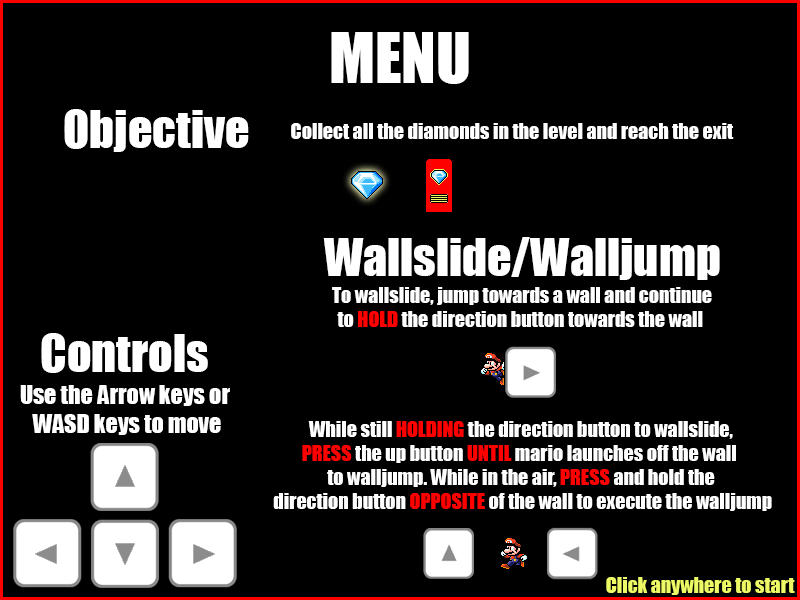
<style>
.page{position:relative;width:800px;height:600px;background:#000000}
.page>*{position:absolute;margin:0}
.t1{font:64px "Impact";color:#ffffff}
.t2{font:48px "Impact";color:#ffffff}
.t3{font:20px "Impact";color:#ffffff}
.t4{font:20px "Impact";color:#ff0000}
.t5{font:24px "Impact";color:#ffffff}
.t6{font:20px "Impact";color:#eefa65}
</style>
<div class="page">
<p class="t1" style="left:331px;top:32px;width:138px;height:52px">MENU</p>
<p class="t2" style="left:64px;top:109px;width:185px;height:43px">Objective</p>
<p class="t3" style="left:291px;top:123px;width:443px;height:16px">Collect all the diamonds in the level and reach the exit</p>
<p class="t2" style="left:323px;top:237px;width:397px;height:43px">Wallslide/Walljump</p>
<p class="t3" style="left:332px;top:287px;width:380px;height:40px;text-align:center">To wallslide, jump towards a wall and continue<br>to <span class="t4">HOLD </span>the direction button towards the wall</p>
<p class="t2" style="left:41px;top:333px;width:167px;height:40px">Controls</p>
<p class="t5" style="left:20px;top:385px;width:210px;height:50px;text-align:center">Use the Arrow keys or <br>WASD keys to move</p>
<p class="t3" style="left:273px;top:421px;width:499px;height:90px;text-align:center">While still <span class="t4">HOLDING</span> the direction button to wallslide,<br><span class="t4">PRESS</span> the up button <span class="t4">UNTIL</span> mario launches off the wall <br>to walljump. While in the air, <span class="t4">PRESS</span> and hold the<br> direction button <span class="t4">OPPOSITE</span> of the wall to execute the walljump</p>
<p class="t6" style="left:606px;top:577px;width:189px;height:18px">Click anywhere to start</p>
</div>
